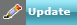
<style>
.page{position:relative;width:77px;height:25px;background:#717373}
.page>*{position:absolute;margin:0}
.t1{font:10.1px "Tahoma-Bold";letter-spacing:0.04em;color:#ffffff;scale:1.1 1}
</style>
<div class="page">
<p class="t1" style="left:28px;top:7px;width:43px;height:10px">Update</p>
</div>
